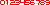
<style>
.page{position:relative;width:50px;height:5px;background:#ffffff}
.page>*{position:absolute;margin:0}
.t1{font:8px "Uni0553";letter-spacing:-0.06em;color:#ff0000}
</style>
<div class="page">
<p class="t1" style="left:0px;top:0px;width:50px;height:5px">0123456789</p>
</div>
